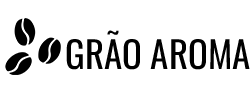
<style>
.page{position:relative;width:250px;height:100px;background:#ffffff}
.page>*{position:absolute;margin:0}
.t1{font:36.7px "Oswald-Regular";color:#000000}
</style>
<div class="page">
<p class="t1" style="left:66px;top:30px;width:184px;height:40px">GRÃO AROMA</p>
</div>
